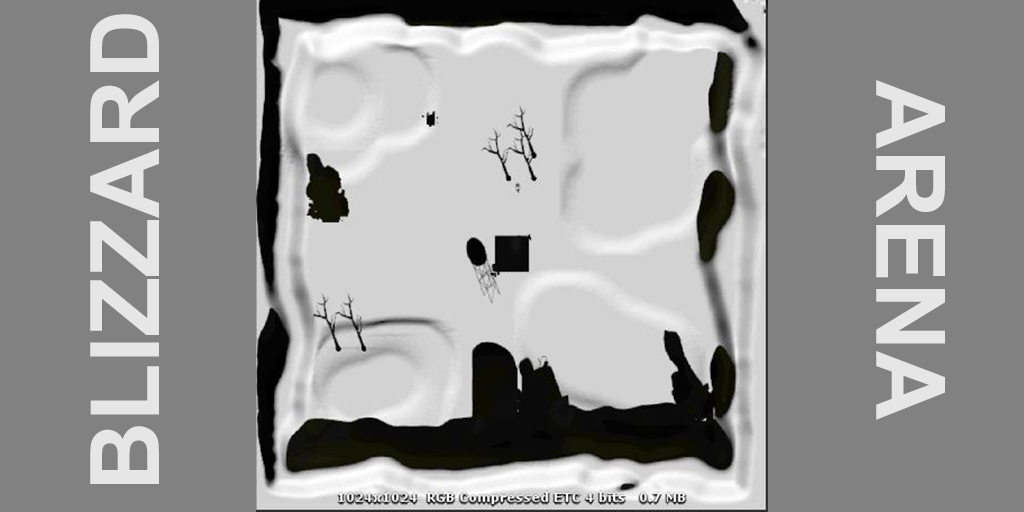
<style>
.page{position:relative;width:1024px;height:512px;background:#818181}
.page>*{position:absolute;margin:0}
.t1{font:96px "Arial-BoldMT";color:#e6e6e6}
</style>
<div class="page">
<p class="t1" style="left:90px;top:14px;width:69px;height:470px;rotate:-90deg">BLIZZARD</p>
<p class="t1" style="left:876px;top:80px;width:69px;height:340px;rotate:90deg">ARENA</p>
</div>
